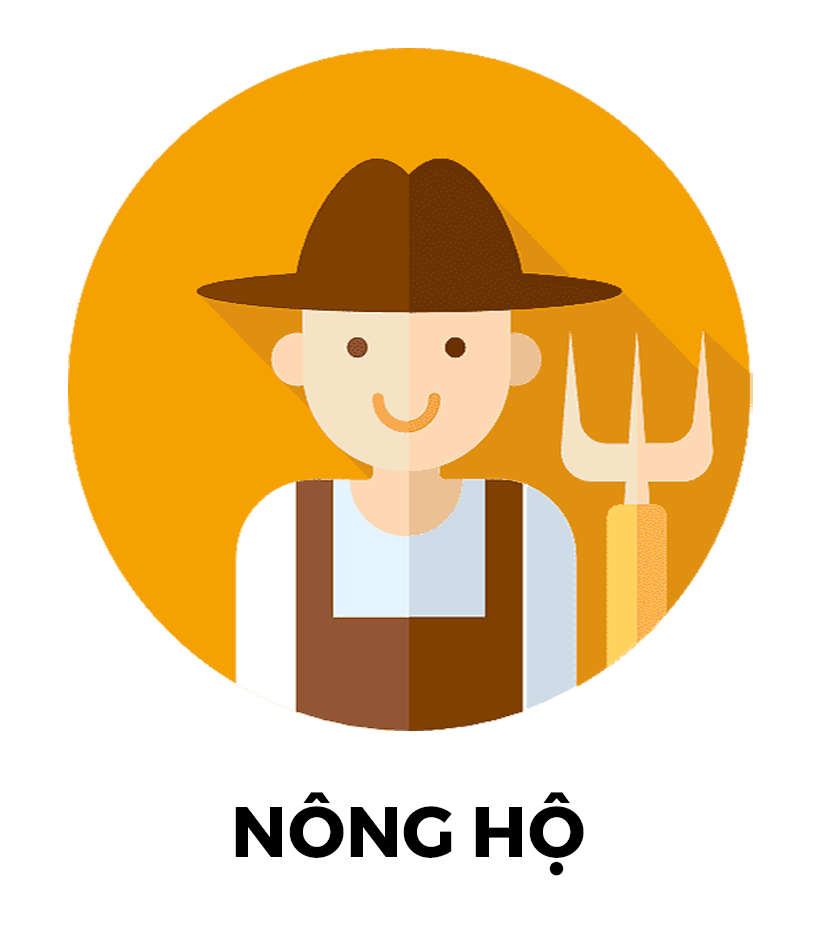
<style>
.page{position:relative;width:820px;height:930px;background:#ffffff}
.page>*{position:absolute;margin:0}
.t1{font:71.2px "#9Slide03MontserratBold-Bold";color:#000000}
</style>
<div class="page">
<p class="t1" style="left:235px;top:792px;width:349px;height:84px">NÔNG HỘ</p>
</div>
